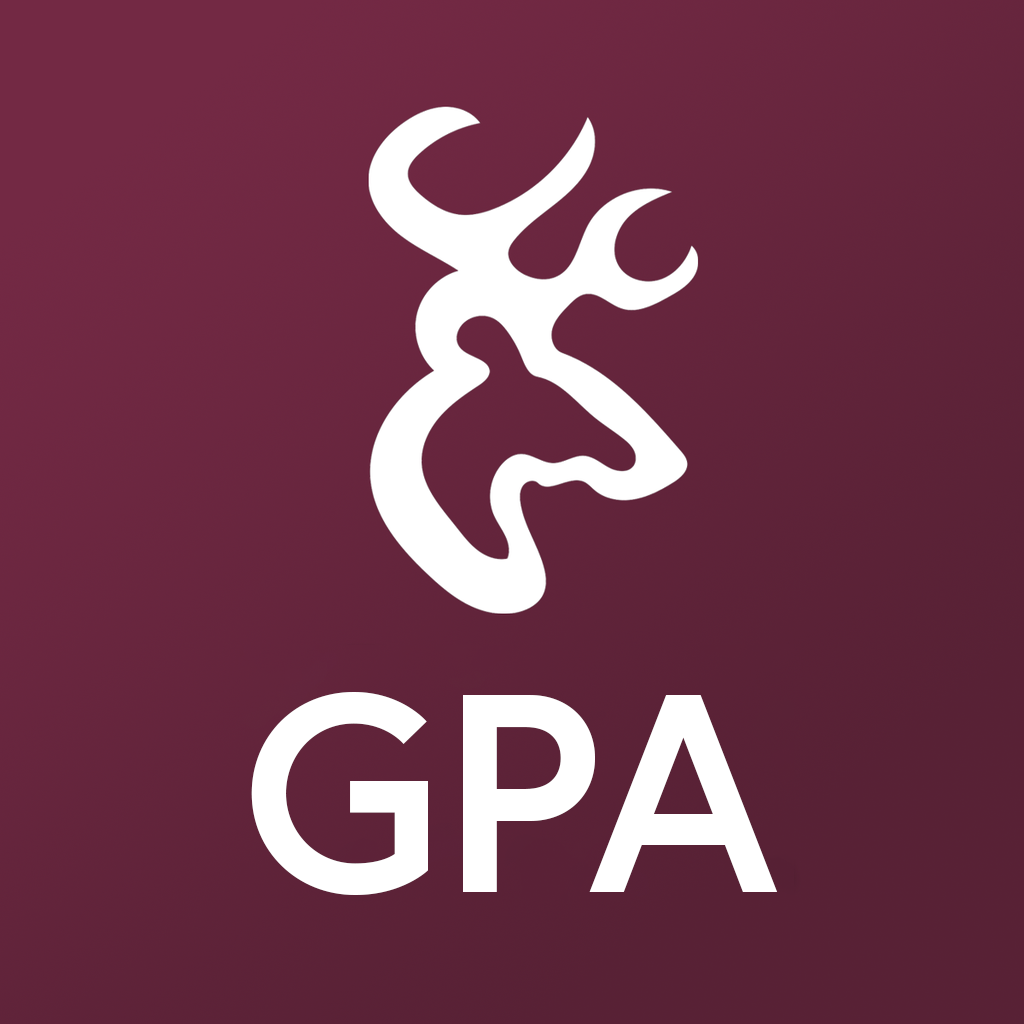
<style>
.page{position:relative;width:1024px;height:1024px}
.page>*{position:absolute;margin:0}
.t1{font:281.3px "Europa-Bold";color:#ffffff;text-transform:uppercase}
</style>
<div class="page">
<p class="t1" style="left:251px;top:692px;width:527px;height:203px">GPA</p>
</div>
